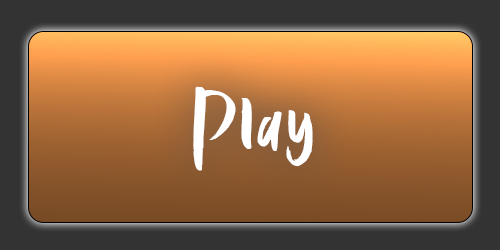
<style>
.page{position:relative;width:500px;height:250px;background:#333333}
.page>*{position:absolute;margin:0}
.t1{font:99px "StoryNight";color:#ffffff}
</style>
<div class="page">
<p class="t1" style="left:193px;top:86px;width:120px;height:85px">Play</p>
</div>
